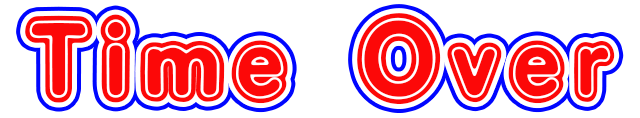
<style>
.page{position:relative;width:640px;height:118px;background:#ffffff}
.page>*{position:absolute;margin:0}
.t1{font:120px "DokiDokiFantasia";letter-spacing:0.02em;color:#fc0808}
</style>
<div class="page">
<p class="t1" style="left:25px;top:13px;width:590px;height:91px">Time Over</p>
</div>
